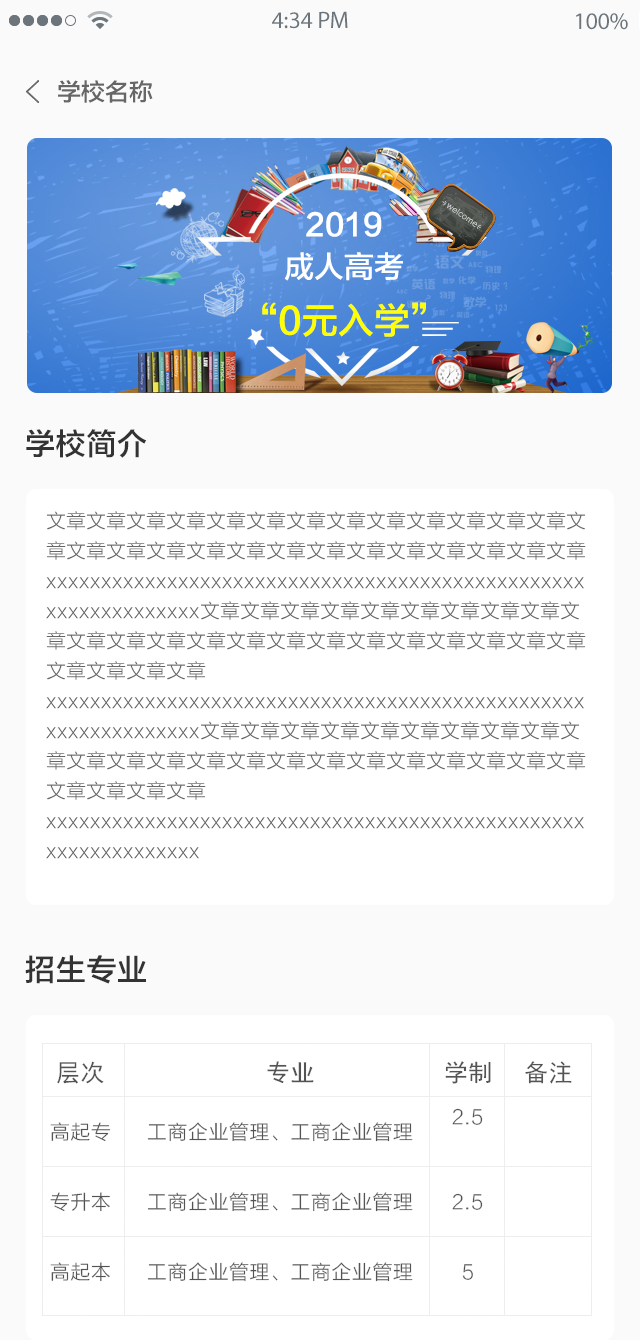
<style>
.page{position:relative;width:640px;height:1340px;background:#ffffff}
.page>*{position:absolute;margin:0}
.t1{font:24px "MyriadPro-Regular";color:#6c757b}
.t2{font:24px "FZLTZHK--GBK1-0";color:#666666}
.t3{font:30px "FZLTZHK--GBK1-0";letter-spacing:0.025em;color:#333333}
.t4{font:20px/30px "FZLTXHK";color:#666666}
</style>
<div class="page">
<p class="t1" style="left:272px;top:11px;width:76px;height:18px">4:34 PM</p>
<p class="t1" style="left:576px;top:13px;width:52px;height:17px">100%</p>
<p class="t2" style="left:58px;top:80px;width:95px;height:23px">学校名称</p>
<p class="t3" style="left:26px;top:429px;width:121px;height:29px">学校简介</p>
<p class="t4" style="left:46px;top:511px;width:540px;height:348px">文章文章文章文章文章文章文章文章文章文章文章文章文章文章文章文章文章文章文章文章文章文章文章文章文章文章文章xxxxxxxxxxxxxxxxxxxxxxxxxxxxxxxxxxxxxxxxxxxxxxxxxxxxxxxxxxxxxxx文章文章文章文章文章文章文章文章文章文章文章文章文章文章文章文章文章文章文章文章文章文章文章文章文章文章文章xxxxxxxxxxxxxxxxxxxxxxxxxxxxxxxxxxxxxxxxxxxxxxxxxxxxxxxxxxxxxxx文章文章文章文章文章文章文章文章文章文章文章文章文章文章文章文章文章文章文章文章文章文章文章文章文章文章文章xxxxxxxxxxxxxxxxxxxxxxxxxxxxxxxxxxxxxxxxxxxxxxxxxxxxxxxxxxxxxxx</p>
<p class="t3" style="left:25px;top:955px;width:121px;height:29px">招生专业</p>
</div>
